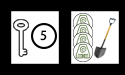
<style>
.page{position:relative;width:125px;height:75px;background:#000000}
.page>*{position:absolute;margin:0}
.t1{font:12.5px "KozGoPr6N-Bold";color:#000000}
</style>
<div class="page">
<p class="t1" style="left:40px;top:30px;width:7px;height:11px">5</p>
</div>
